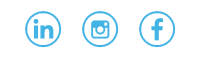
<style>
.page{position:relative;width:200px;height:60px;background:#ffffff}
.page>*{position:absolute;margin:0}
.t1{font:52px "Social-Shapes";letter-spacing:0.025em;color:#41b3e4}
</style>
<div class="page">
<p class="t1" style="left:25px;top:11px;width:37px;height:37px">i</p>
<p class="t1" style="left:82px;top:11px;width:37px;height:37px">f</p>
<p class="t1" style="left:139px;top:11px;width:37px;height:37px">c</p>
</div>
